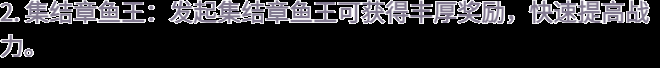
<style>
.page{position:relative;width:660px;height:68px;background:#000000}
.page>*{position:absolute;margin:0}
.t1{font:24px/34px "WebPSD-18463539-0-Regular";color:#837a91;font-weight:bold}
</style>
<div class="page">
<p class="t1" style="left:0px;top:0px;width:660px;height:68px">2. 集结章鱼王：发起集结章鱼王可获得丰厚奖励，快速提高战<br>力。</p>
</div>
